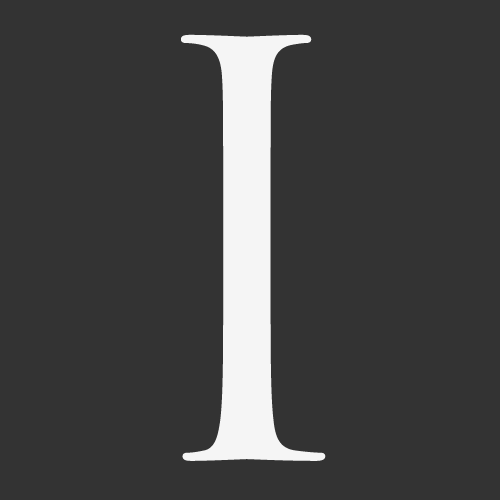
<style>
.page{position:relative;width:500px;height:500px;background:#333333}
.page>*{position:absolute;margin:0}
.t1{font:563.1px "TrajanPro-Regular";letter-spacing:0.04em;color:#f5f5f5}
</style>
<div class="page">
<p class="t1" style="left:181px;top:34px;width:145px;height:427px">I</p>
</div>
